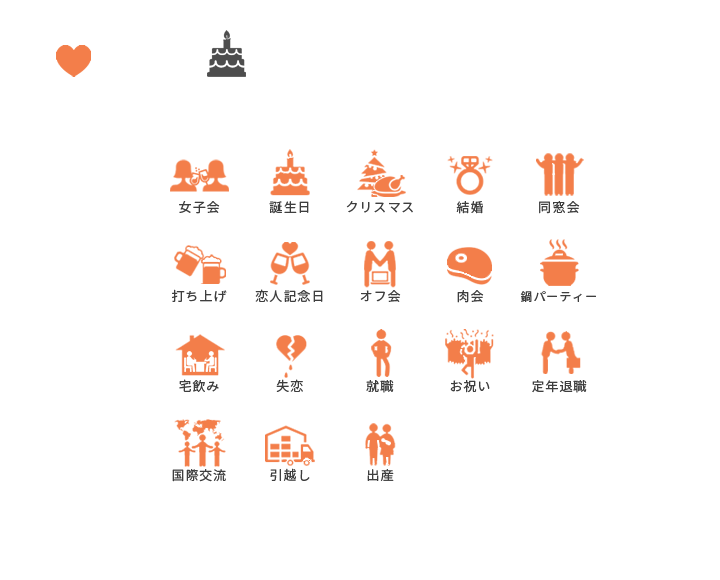
<style>
.page{position:relative;width:720px;height:580px;background:#ffffff}
.page>*{position:absolute;margin:0}
.t1{font:13px "NotoSansCJKjp-Regular";letter-spacing:0.075em;color:#3e3e3e}
.t2{font:12px "NotoSansCJKjp-Regular";letter-spacing:0.075em;color:#3e3e3e}
</style>
<div class="page">
<p class="t1" style="left:179px;top:201px;width:41px;height:13px">女子会</p>
<p class="t1" style="left:269px;top:201px;width:40px;height:13px">誕生日</p>
<p class="t1" style="left:346px;top:201px;width:67px;height:12px">クリスマス</p>
<p class="t1" style="left:456px;top:201px;width:27px;height:13px">結婚</p>
<p class="t1" style="left:539px;top:201px;width:41px;height:13px">同窓会</p>
<p class="t1" style="left:172px;top:289px;width:55px;height:13px">打ち上げ</p>
<p class="t1" style="left:255px;top:289px;width:68px;height:13px">恋人記念日</p>
<p class="t1" style="left:360px;top:290px;width:41px;height:12px">オフ会</p>
<p class="t1" style="left:457px;top:290px;width:27px;height:13px">肉会</p>
<p class="t2" style="left:520px;top:291px;width:76px;height:11px">鍋パーティー</p>
<p class="t1" style="left:179px;top:379px;width:40px;height:13px">宅飲み</p>
<p class="t1" style="left:276px;top:379px;width:27px;height:13px">失恋</p>
<p class="t1" style="left:366px;top:380px;width:28px;height:13px">就職</p>
<p class="t1" style="left:450px;top:380px;width:40px;height:13px">お祝い</p>
<p class="t1" style="left:532px;top:380px;width:55px;height:13px">定年退職</p>
<p class="t1" style="left:172px;top:469px;width:54px;height:13px">国際交流</p>
<p class="t1" style="left:270px;top:468px;width:40px;height:13px">引越し</p>
<p class="t1" style="left:367px;top:469px;width:27px;height:12px">出産</p>
</div>
